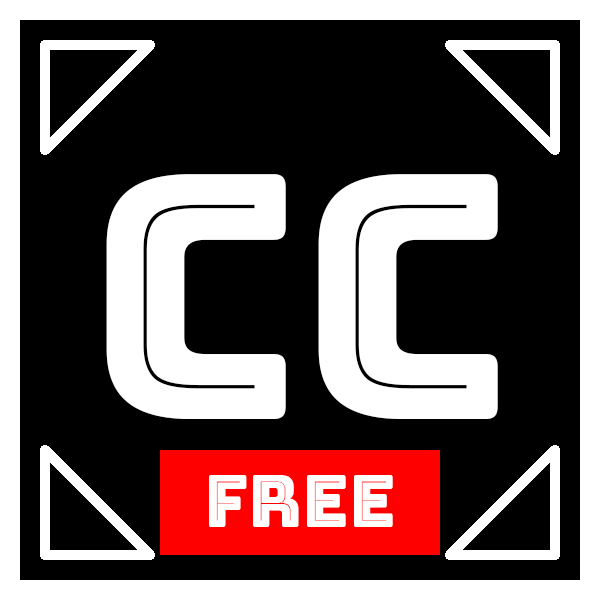
<style>
.page{position:relative;width:600px;height:600px;background:#000000}
.page>*{position:absolute;margin:0}
.t1{font:340px "BungeeInline-Regular";color:#ffffff}
.t2{font:72px "BungeeInline-Regular";color:#ffffff}
</style>
<div class="page">
<p class="t1" style="left:106px;top:174px;width:392px;height:245px">CC</p>
<p class="t2" style="left:209px;top:475px;width:184px;height:52px">Free</p>
</div>
